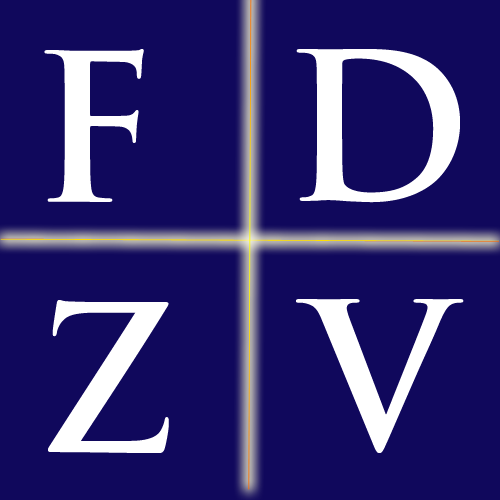
<style>
.page{position:relative;width:500px;height:500px;background:#10085c}
.page>*{position:absolute;margin:0}
.t1{font:200px "TrajanPro-Bold";color:#ffffff}
</style>
<div class="page">
<p class="t1" style="left:44px;top:49px;width:100px;height:153px">F</p>
<p class="t1" style="left:296px;top:49px;width:164px;height:154px">D</p>
<p class="t1" style="left:48px;top:300px;width:121px;height:153px">Z</p>
<p class="t1" style="left:296px;top:299px;width:168px;height:154px">V</p>
</div>
